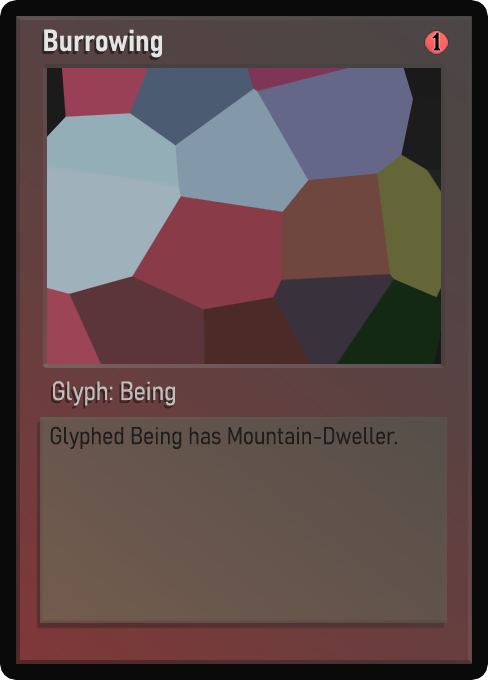
<style>
.page{position:relative;width:488px;height:680px}
.page>*{position:absolute;margin:0}
.t1{font:30px "Bahnschrift-SemiBoldSemiCondensed";color:#f2f2f2;font-weight:bold}
.t2{font:25px "WTRRoycroft";color:#000000;font-weight:bold;scale:1.09 1}
.t3{font:26px "Bahnschrift-LightSemiCondensed";color:#c8c8c8;font-weight:bold}
.t4{font:24px "Bahnschrift-LightSemiCondensed";color:#1e1e1e;font-weight:bold}
</style>
<div class="page">
<p class="t1" style="left:44px;top:29px;width:118px;height:29px;opacity:0.9">Burrowing</p>
<p class="t2" style="left:432px;top:32px;width:9px;height:19px">1</p>
<p class="t3" style="left:53px;top:381px;width:122px;height:25px;opacity:0.9">Glyph: Being</p>
<p class="t4" style="left:50px;top:426px;width:347px;height:24px">Glyphed Being has Mountain-Dweller.</p>
</div>
